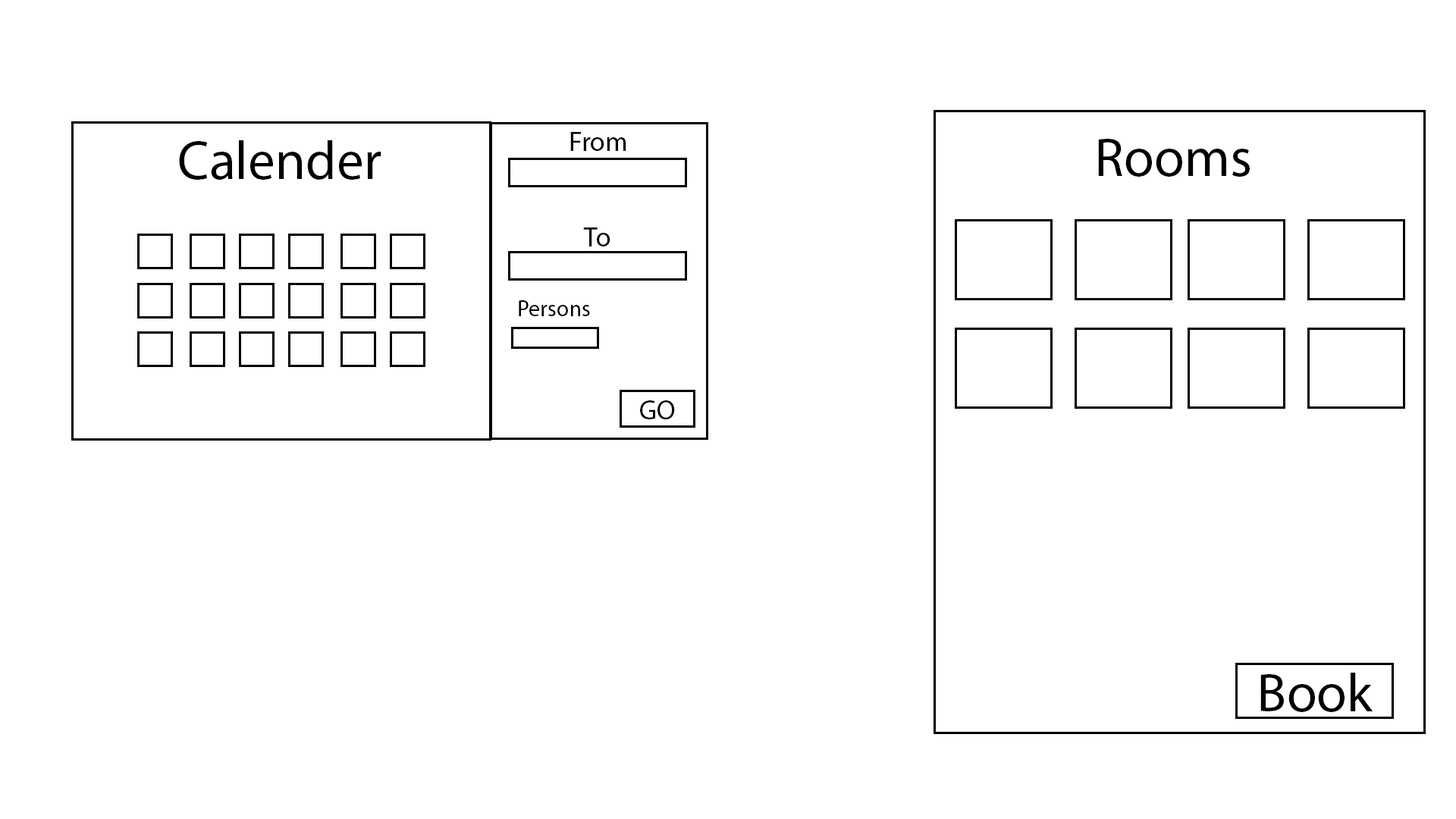
<style>
.page{position:relative;width:1456px;height:819px;background:#ffffff}
.page>*{position:absolute;margin:0}
.t1{font:27.3px "MyriadPro-Regular";color:#000000}
.t2{font:54.6px "MyriadPro-Regular";color:#000000}
.t3{font:22.7px "MyriadPro-Regular";color:#000000}
</style>
<div class="page">
<p class="t1" style="left:570px;top:132px;width:56px;height:19px">From</p>
<p class="t2" style="left:179px;top:140px;width:202px;height:40px">Calender</p>
<p class="t2" style="left:1098px;top:139px;width:152px;height:38px">Rooms</p>
<p class="t1" style="left:583px;top:227px;width:27px;height:19px">To</p>
<p class="t3" style="left:519px;top:300px;width:71px;height:16px">Persons</p>
<p class="t1" style="left:640px;top:400px;width:35px;height:19px">GO</p>
<p class="t2" style="left:1260px;top:673px;width:113px;height:39px">Book</p>
</div>
